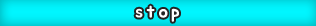
<style>
.page{position:relative;width:316px;height:26px}
.page>*{position:absolute;margin:0}
.t1{font:18px "BMJUA";letter-spacing:0.16em;color:#ffffff}
</style>
<div class="page">
<p class="t1" style="left:135px;top:5px;width:44px;height:17px">stop</p>
</div>
